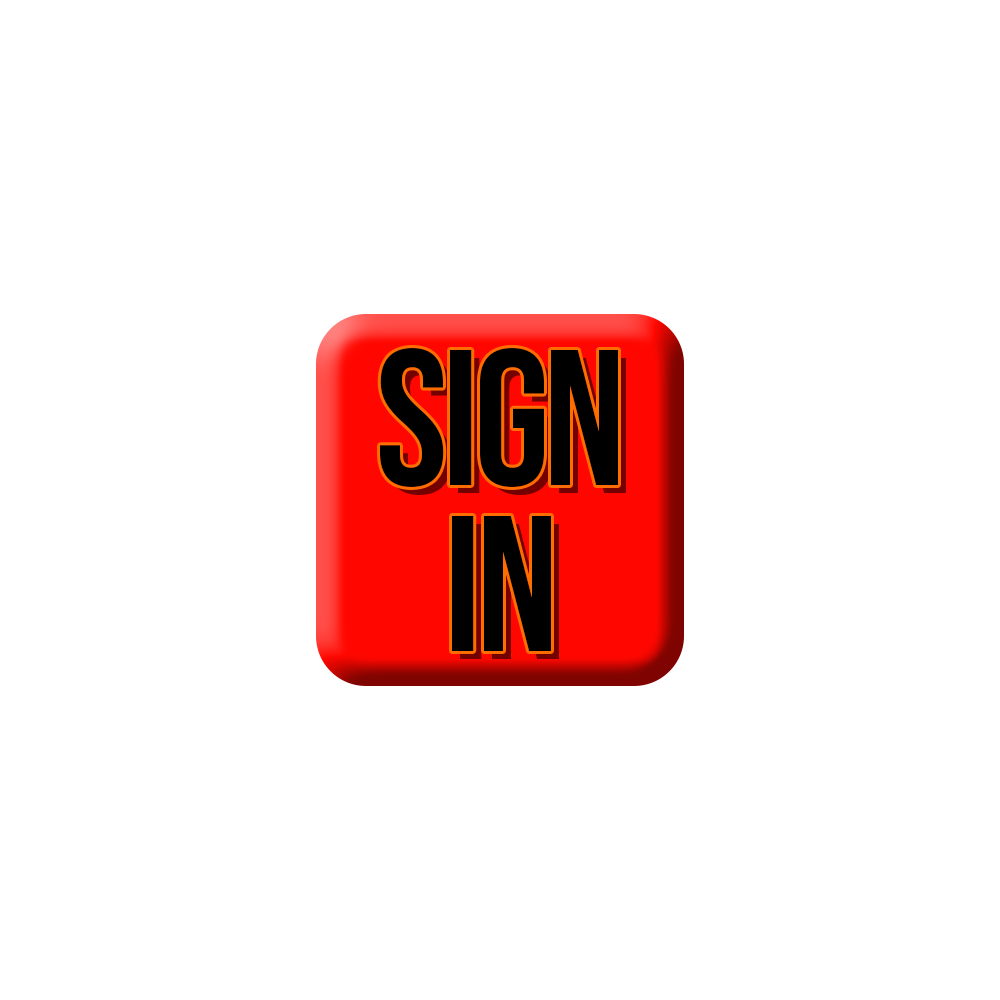
<style>
.page{position:relative;width:1000px;height:1000px;background:#ffffff}
.page>*{position:absolute;margin:0}
.t1{font:193.1px/166.7px "BebasNeue-Regular";letter-spacing:-0.03em;color:#000000}
</style>
<div class="page">
<p class="t1" style="left:380px;top:348px;width:238px;height:303px;text-align:center">SIGN<br>IN</p>
</div>
